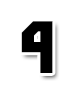
<style>
.page{position:relative;width:74px;height:93px;background:#ffffff}
.page>*{position:absolute;margin:0}
.t1{font:72px "No-Continue";color:#000000}
</style>
<div class="page">
<p class="t1" style="left:21px;top:21px;width:32px;height:52px">4</p>
</div>
